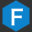
<style>
.page{position:relative;width:32px;height:32px;background:#0e83cd}
.page>*{position:absolute;margin:0}
.t1{font:21px "HiraginoSansGB-W6";color:#ffffff}
</style>
<div class="page">
<p class="t1" style="left:11px;top:8px;width:12px;height:18px">F</p>
</div>
